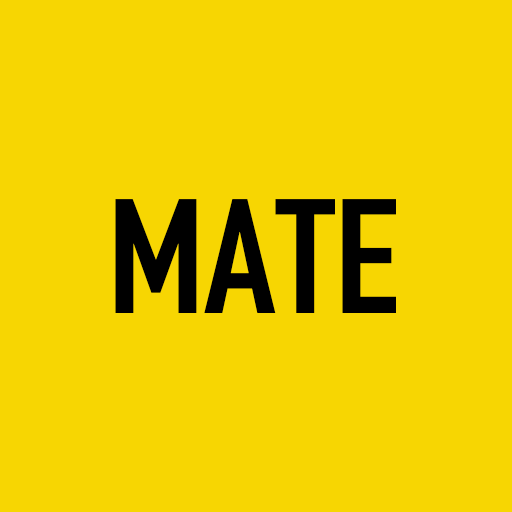
<style>
.page{position:relative;width:512px;height:512px;background:#f7d602}
.page>*{position:absolute;margin:0}
.t1{font:160px "DINCondensed-Bold";color:#000000;scale:1.1 1}
</style>
<div class="page">
<p class="t1" style="left:115px;top:199px;width:281px;height:114px">MATE</p>
</div>
